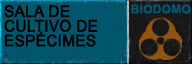
<style>
.page{position:relative;width:192px;height:64px}
.page>*{position:absolute;margin:0}
.t1{font:16px/14.7px "ArialMT";color:#000000;text-transform:uppercase;font-weight:bold;scale:0.95 1}
.t2{font:12px "Arial-BoldMT";letter-spacing:0.02em;color:#005a73;text-transform:uppercase}
</style>
<div class="page">
<p class="t1" style="left:4px;top:5px;width:94px;height:42px">Sala de<br>cultivo de<br>espécimes</p>
<p class="t2" style="left:131px;top:4px;width:60px;height:10px">BIODOMO</p>
</div>
